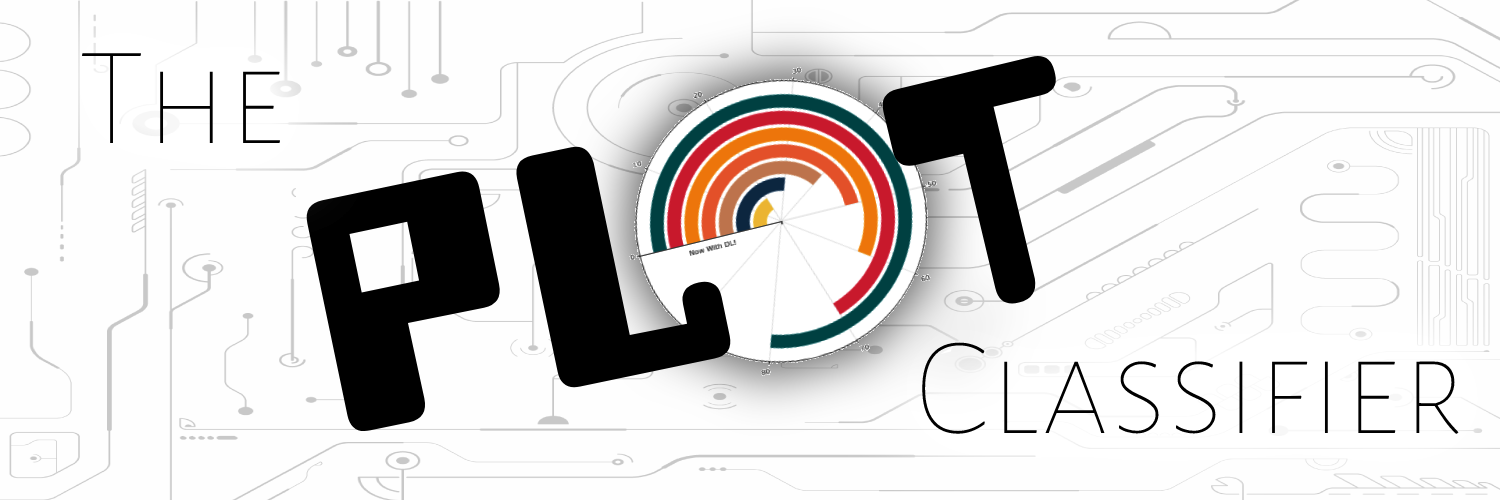
<style>
.page{position:relative;width:1500px;height:500px;background:#fefefe}
.page>*{position:absolute;margin:0}
.t1{font:141px "Datalegreya-Dot";color:#000000}
.t2{font:400px "HeavyData";color:#000000}
</style>
<div class="page">
<p class="t1" style="left:81px;top:53px;width:200px;height:90px">The</p>
<p class="t2" style="left:879px;top:52px;width:181px;height:256px;rotate:-14deg">t</p>
<p class="t2" style="left:306px;top:146px;width:425px;height:285px;rotate:-12deg">PL</p>
<p class="t1" style="left:922px;top:342px;width:537px;height:92px">Classifier</p>
</div>
